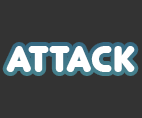
<style>
.page{position:relative;width:142px;height:118px;background:#333333}
.page>*{position:absolute;margin:0}
.t1{font:44px "Junegull";color:#ffffff}
</style>
<div class="page">
<p class="t1" style="left:6px;top:46px;width:129px;height:26px">ATTACK</p>
</div>
